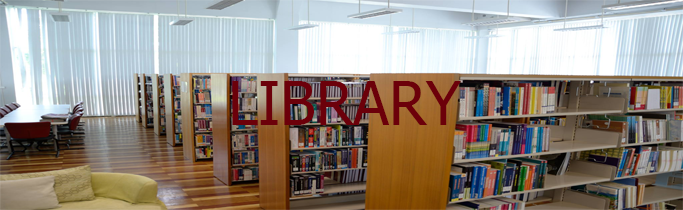
<style>
.page{position:relative;width:683px;height:210px}
.page>*{position:absolute;margin:0}
.t1{font:60px "Tahoma";color:#6c000a}
</style>
<div class="page">
<p class="t1" style="left:232px;top:81px;width:229px;height:44px">LIBRARY</p>
</div>
